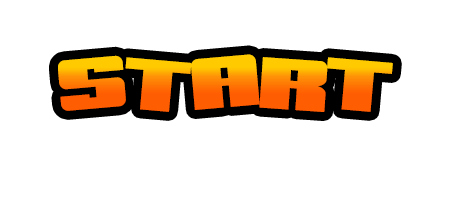
<style>
.page{position:relative;width:468px;height:204px;background:#ffffff}
.page>*{position:absolute;margin:0}
.t1{font:72px "AftershockDebrisSolid"}
</style>
<div class="page">
<p class="t1" style="left:58px;top:54px;width:335px;height:58px">START</p>
</div>
